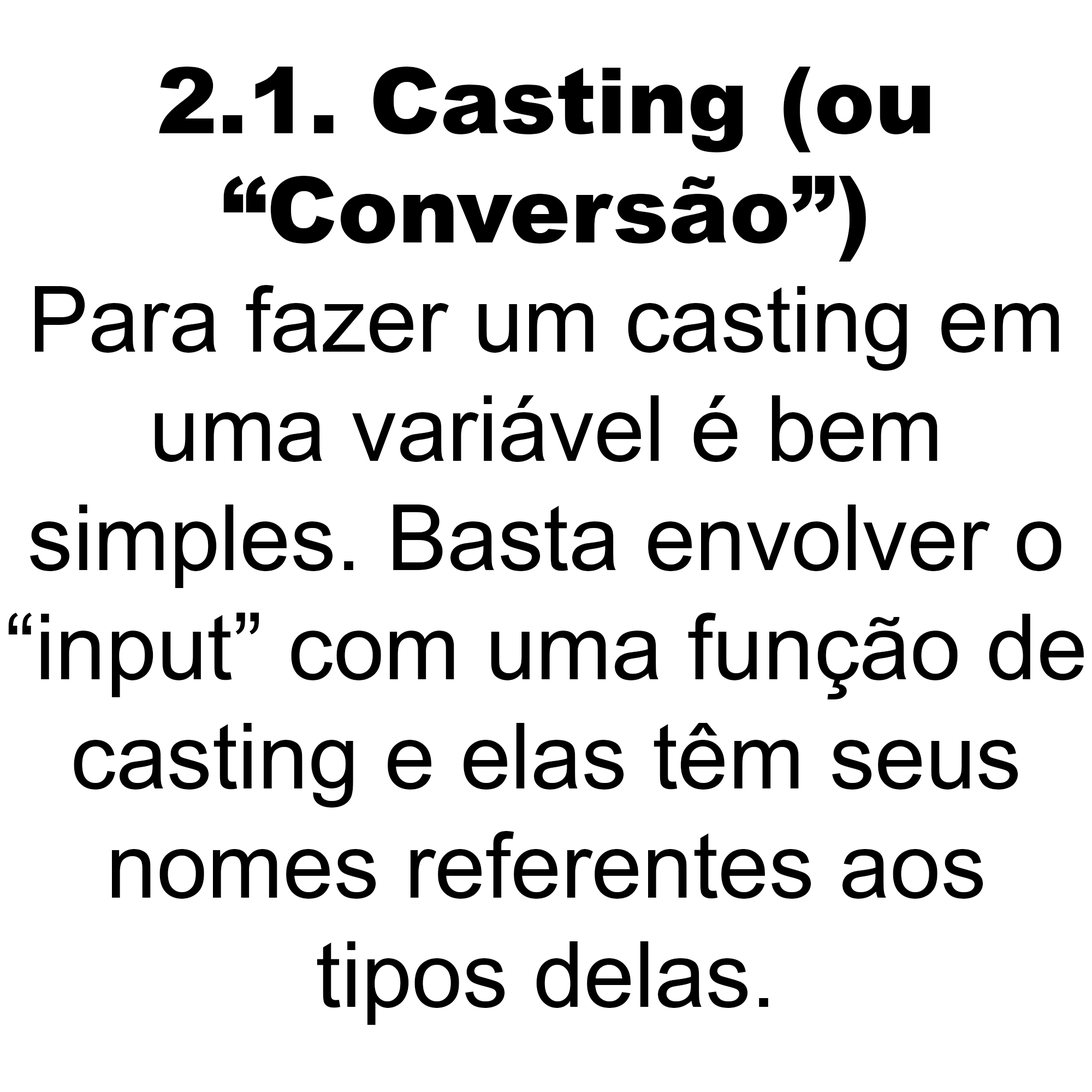
<style>
.page{position:relative;width:1092px;height:1092px;background:#ffffff}
.page>*{position:absolute;margin:0}
.t1{font:91px "ArialMT";color:#000000}
.t2{font:91px "Arial-Black";color:#000000}
</style>
<div class="page">
<p class="t1" style="left:8px;top:67px;width:1076px;height:958px;text-align:center"><span class="t2">2.1. Casting (ou<br>“Conversão”)<br></span>Para fazer um casting em<br>uma variável é bem<br>simples. Basta envolver o<br>“input” com uma função de<br>casting e elas têm seus<br>nomes referentes aos<br>tipos delas.</p>
</div>
